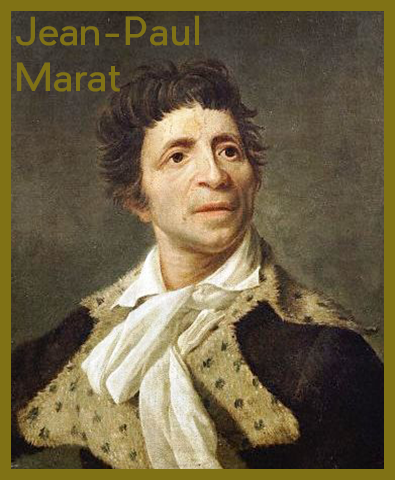
<style>
.page{position:relative;width:395px;height:480px}
.page>*{position:absolute;margin:0}
.t1{font:38px "PierSans";color:#807215}
</style>
<div class="page">
<p class="t1" style="left:16px;top:15px;width:183px;height:77px">Jean-Paul<br>Marat</p>
</div>
